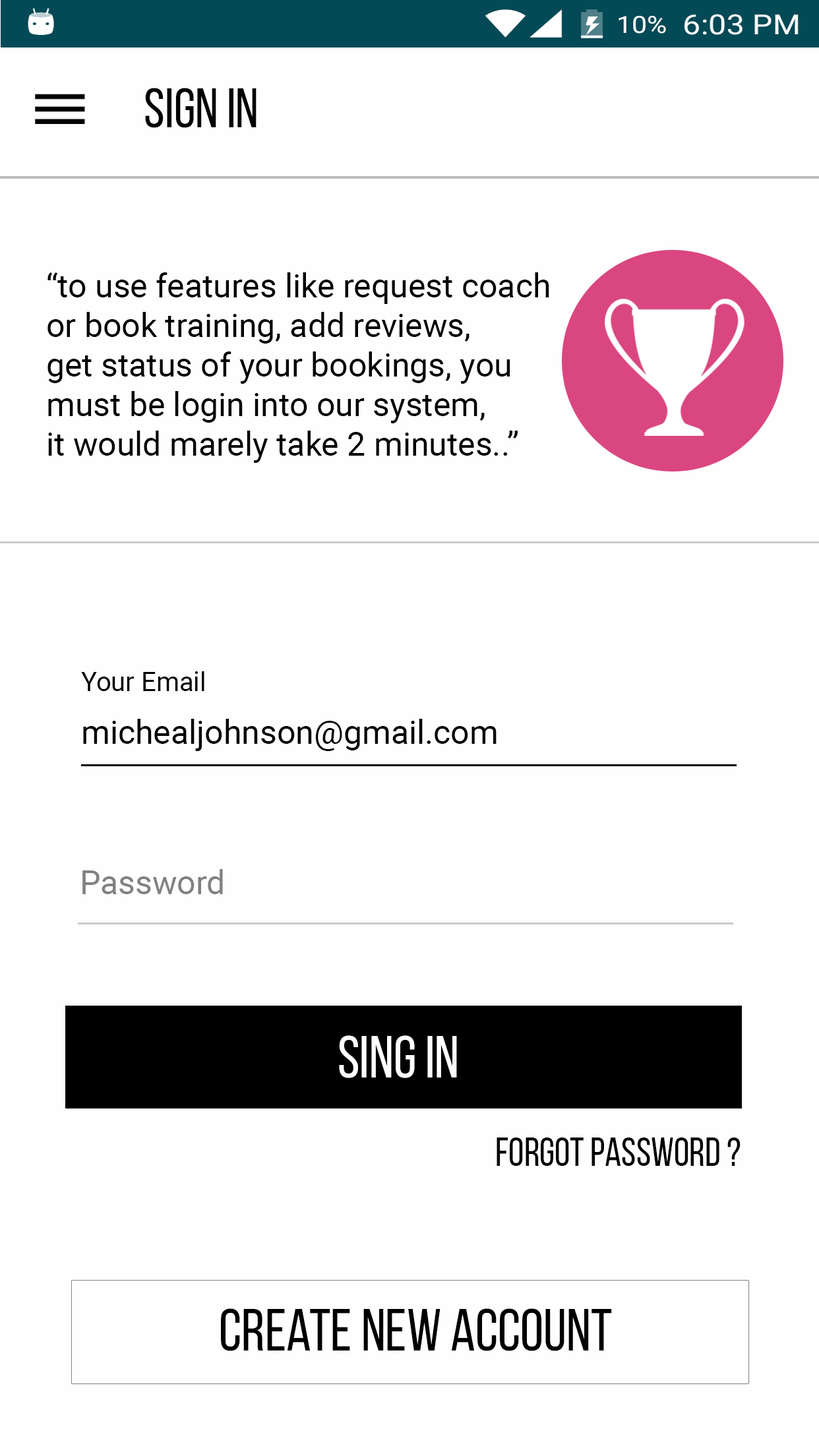
<style>
.page{position:relative;width:819px;height:1456px;background:#fefefe}
.page>*{position:absolute;margin:0}
.t1{font:56px "BebasNeueRegular";color:#010101}
.t2{font:33px "Roboto-Regular";color:#000000}
.t3{font:26.4px "Roboto-Regular";color:#000000}
.t4{font:33px "Roboto-Regular";color:#828181}
.t5{font:59.3px "BebasNeueRegular";color:#fefdfd}
.t6{font:39.6px "BebasNeueRegular";color:#010101}
.t7{font:59.3px "BebasNeueRegular";color:#000000}
</style>
<div class="page">
<p class="t1" style="left:145px;top:88px;width:112px;height:40px">SiGN IN</p>
<p class="t2" style="left:47px;top:272px;width:502px;height:191px">“to use features like request coach <br>or book training, add reviews,<br>get status of your bookings, you <br>must be login into our system,<br>it would marely take 2 minutes..”</p>
<p class="t3" style="left:81px;top:671px;width:123px;height:20px">Your Email</p>
<p class="t2" style="left:83px;top:719px;width:414px;height:32px">michealjohnson@gmail.com</p>
<p class="t4" style="left:82px;top:869px;width:141px;height:25px">Password</p>
<p class="t5" style="left:339px;top:1035px;width:118px;height:43px">SING IN</p>
<p class="t6" style="left:497px;top:1137px;width:244px;height:29px">Forgot Password ?</p>
<p class="t7" style="left:221px;top:1308px;width:391px;height:43px">CReate new account</p>
</div>
